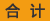
<style>
.page{position:relative;width:50px;height:21px;background:#f39c12}
.page>*{position:absolute;margin:0}
.t1{font:14.6px "MicrosoftYaHei";letter-spacing:0.68em;color:#333333;font-weight:bold}
</style>
<div class="page">
<p class="t1" style="left:5px;top:3px;width:40px;height:16px">合计</p>
</div>
